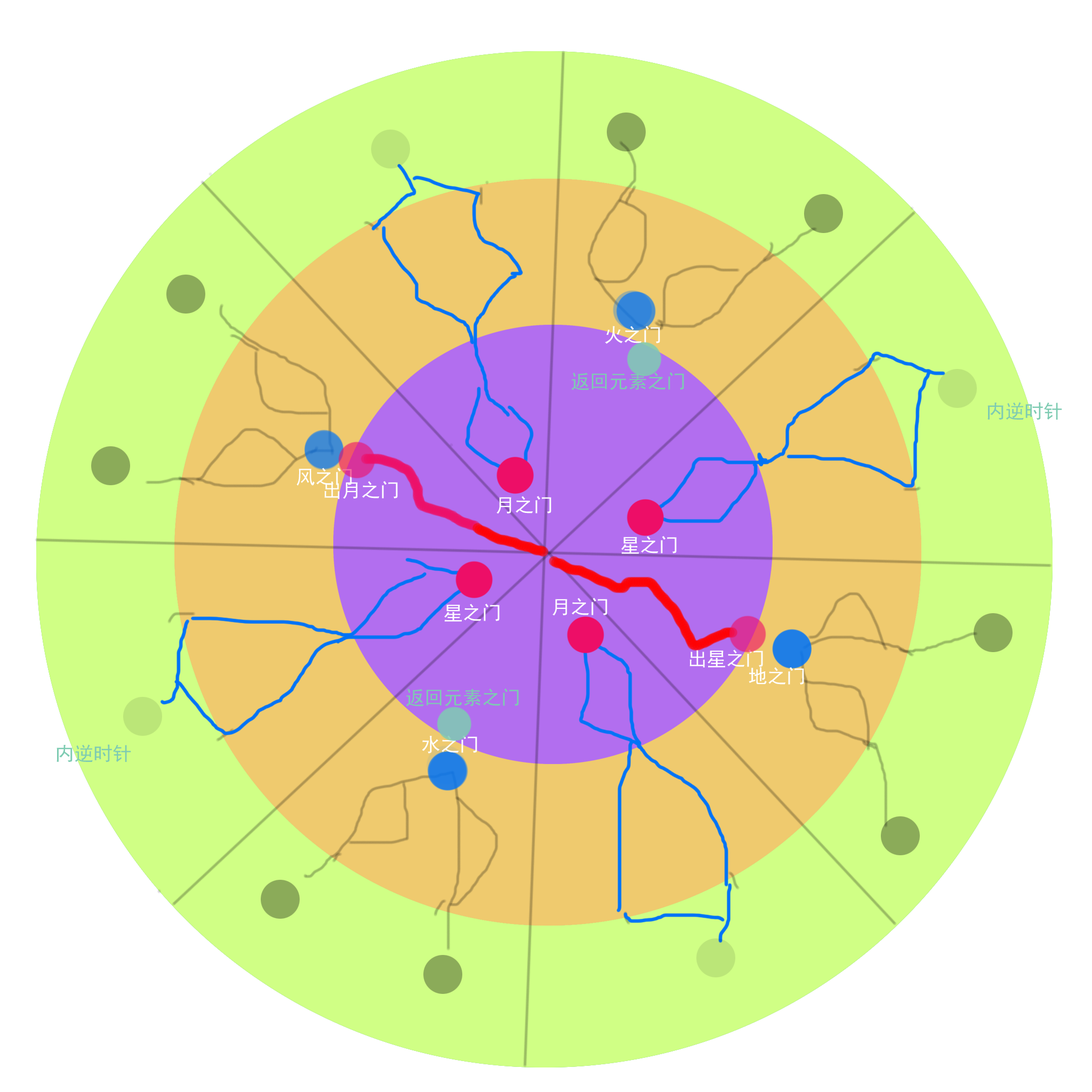
<style>
.page{position:relative;width:1092px;height:1092px;background:#ffffff}
.page>*{position:absolute;margin:0}
.t1{font:19.2px "SimHei";color:#ffffff}
.t2{font:19.2px "SimHei";color:#7ecbb2}
</style>
<div class="page">
<p class="t1" style="left:605px;top:326px;width:55px;height:18px">火之门</p>
<p class="t2" style="left:571px;top:372px;width:113px;height:18px">返回元素之门</p>
<p class="t1" style="left:296px;top:468px;width:56px;height:18px">风之门</p>
<p class="t1" style="left:324px;top:481px;width:74px;height:18px">出月之门</p>
<p class="t1" style="left:496px;top:496px;width:55px;height:18px">月之门</p>
<p class="t1" style="left:621px;top:536px;width:56px;height:18px">星之门</p>
<p class="t1" style="left:444px;top:604px;width:56px;height:18px">星之门</p>
<p class="t1" style="left:552px;top:598px;width:55px;height:18px">月之门</p>
<p class="t1" style="left:689px;top:649px;width:74px;height:19px">出星之门</p>
<p class="t1" style="left:749px;top:667px;width:55px;height:18px">地之门</p>
<p class="t2" style="left:406px;top:688px;width:113px;height:18px">返回元素之门</p>
<p class="t1" style="left:422px;top:735px;width:55px;height:18px">水之门</p>
</div>
